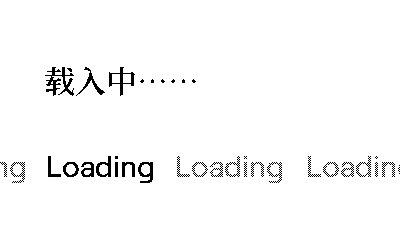
<style>
.page{position:relative;width:400px;height:240px;background:#ffffff}
.page>*{position:absolute;margin:0}
.t1{font:31px "SourceHanSerifCNVF-SemiBold";color:#000000}
.t2{font:30px "Roobert-Medium";color:#000000}
.t3{font:30px "Roobert-Medium"}
</style>
<div class="page">
<p class="t1" style="left:45px;top:67px;width:151px;height:29px">载入中……</p>
<p class="t2" style="left:48px;top:156px;width:105px;height:27px">Loading</p>
<p class="t3" style="left:177px;top:156px;width:105px;height:27px">Loading</p>
</div>
